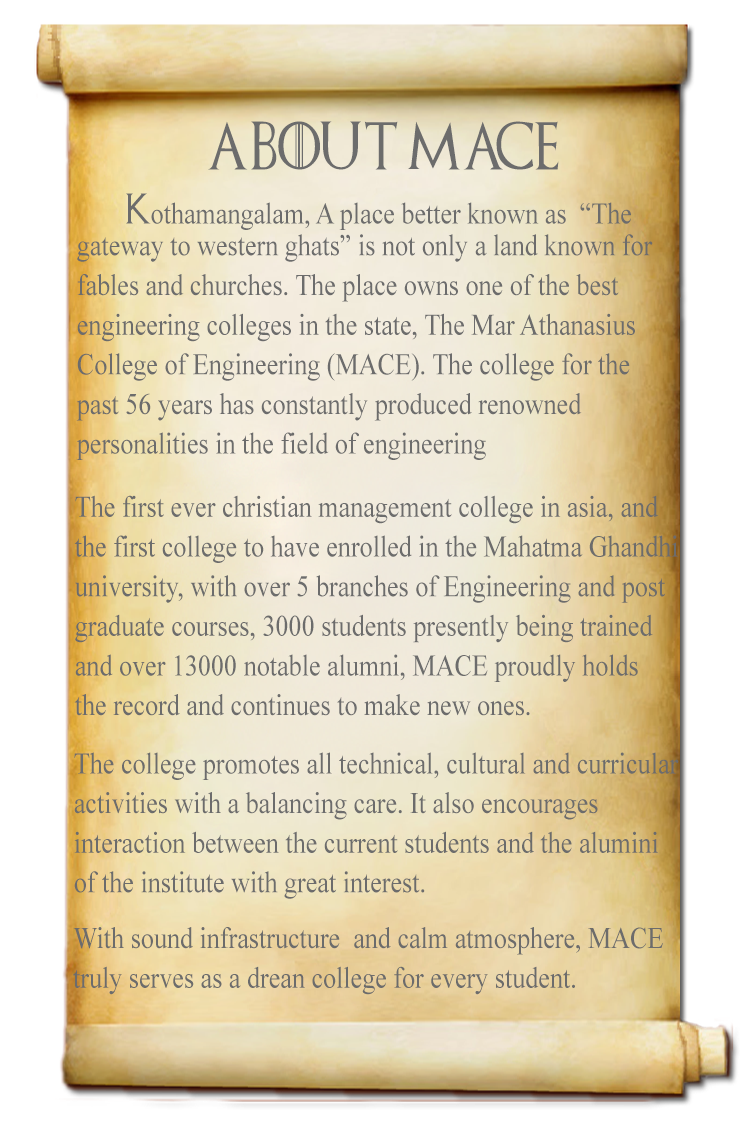
<style>
.page{position:relative;width:745px;height:1137px}
.page>*{position:absolute;margin:0}
.t1{font:48px "GameofThrones";color:#6c6c6c;scale:0.87 1}
.t2{font:30px "TimesNewRomanPSMT";color:#6c6c6c;scale:0.87 1}
.t3{font:30px "GameofThrones";color:#6c6c6c;scale:0.87 1}
.t4{font:30px/39.6px "TimesNewRomanPSMT";color:#6c6c6c;scale:0.87 1}
.t5{font:30.1px/39.8px "TimesNewRomanPSMT";color:#6c6c6c;scale:0.87 1}
</style>
<div class="page">
<p class="t1" style="left:208px;top:121px;width:351px;height:49px">About MACE</p>
<p class="t2" style="left:126px;top:193px;width:505px;height:37px"><span class="t3">K</span>othamangalam, A place better known as  “The</p>
<p class="t4" style="left:76px;top:234px;width:577px;height:226px">gateway to western ghats” is not only a land known for<br>fables and churches. The place owns one of the best <br>engineering colleges in the state, The Mar Athanasius <br>College of Engineering (MACE). The college for the <br>past 56 years has constantly produced renowned<br>personalities in the field of engineering</p>
<p class="t4" style="left:74px;top:495px;width:604px;height:221px">The first ever christian management college in asia, and<br>the first college to have enrolled in the Mahatma Ghandhi<br>university, with over 5 branches of Engineering and post<br>graduate courses, 3000 students presently being trained<br>and over 13000 notable alumni, MACE proudly holds <br>the record and continues to make new ones.</p>
<p class="t4" style="left:74px;top:752px;width:605px;height:147px">The college promotes all technical, cultural and curricular<br>activities with a balancing care. It also encourages<br>interaction between the current students and the alumini<br>of the institute with great interest.</p>
<p class="t5" style="left:73px;top:927px;width:590px;height:68px">With sound infrastructure  and calm atmosphere, MACE <br>truly serves as a drean college for every student.</p>
</div>
